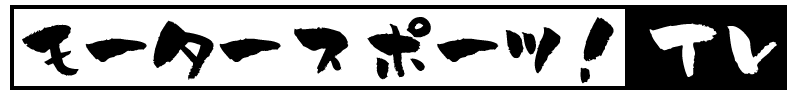
<style>
.page{position:relative;width:800px;height:100px;background:#ffffff}
.page>*{position:absolute;margin:0}
.t1{font:93.4px "YAKITORI";color:#000000}
.t2{font:93.4px "YAKITORI";color:#ffffff}
</style>
<div class="page">
<p class="t1" style="left:22px;top:17px;width:755px;height:67px">モータースポーツ! <span class="t2">TV</span></p>
</div>
